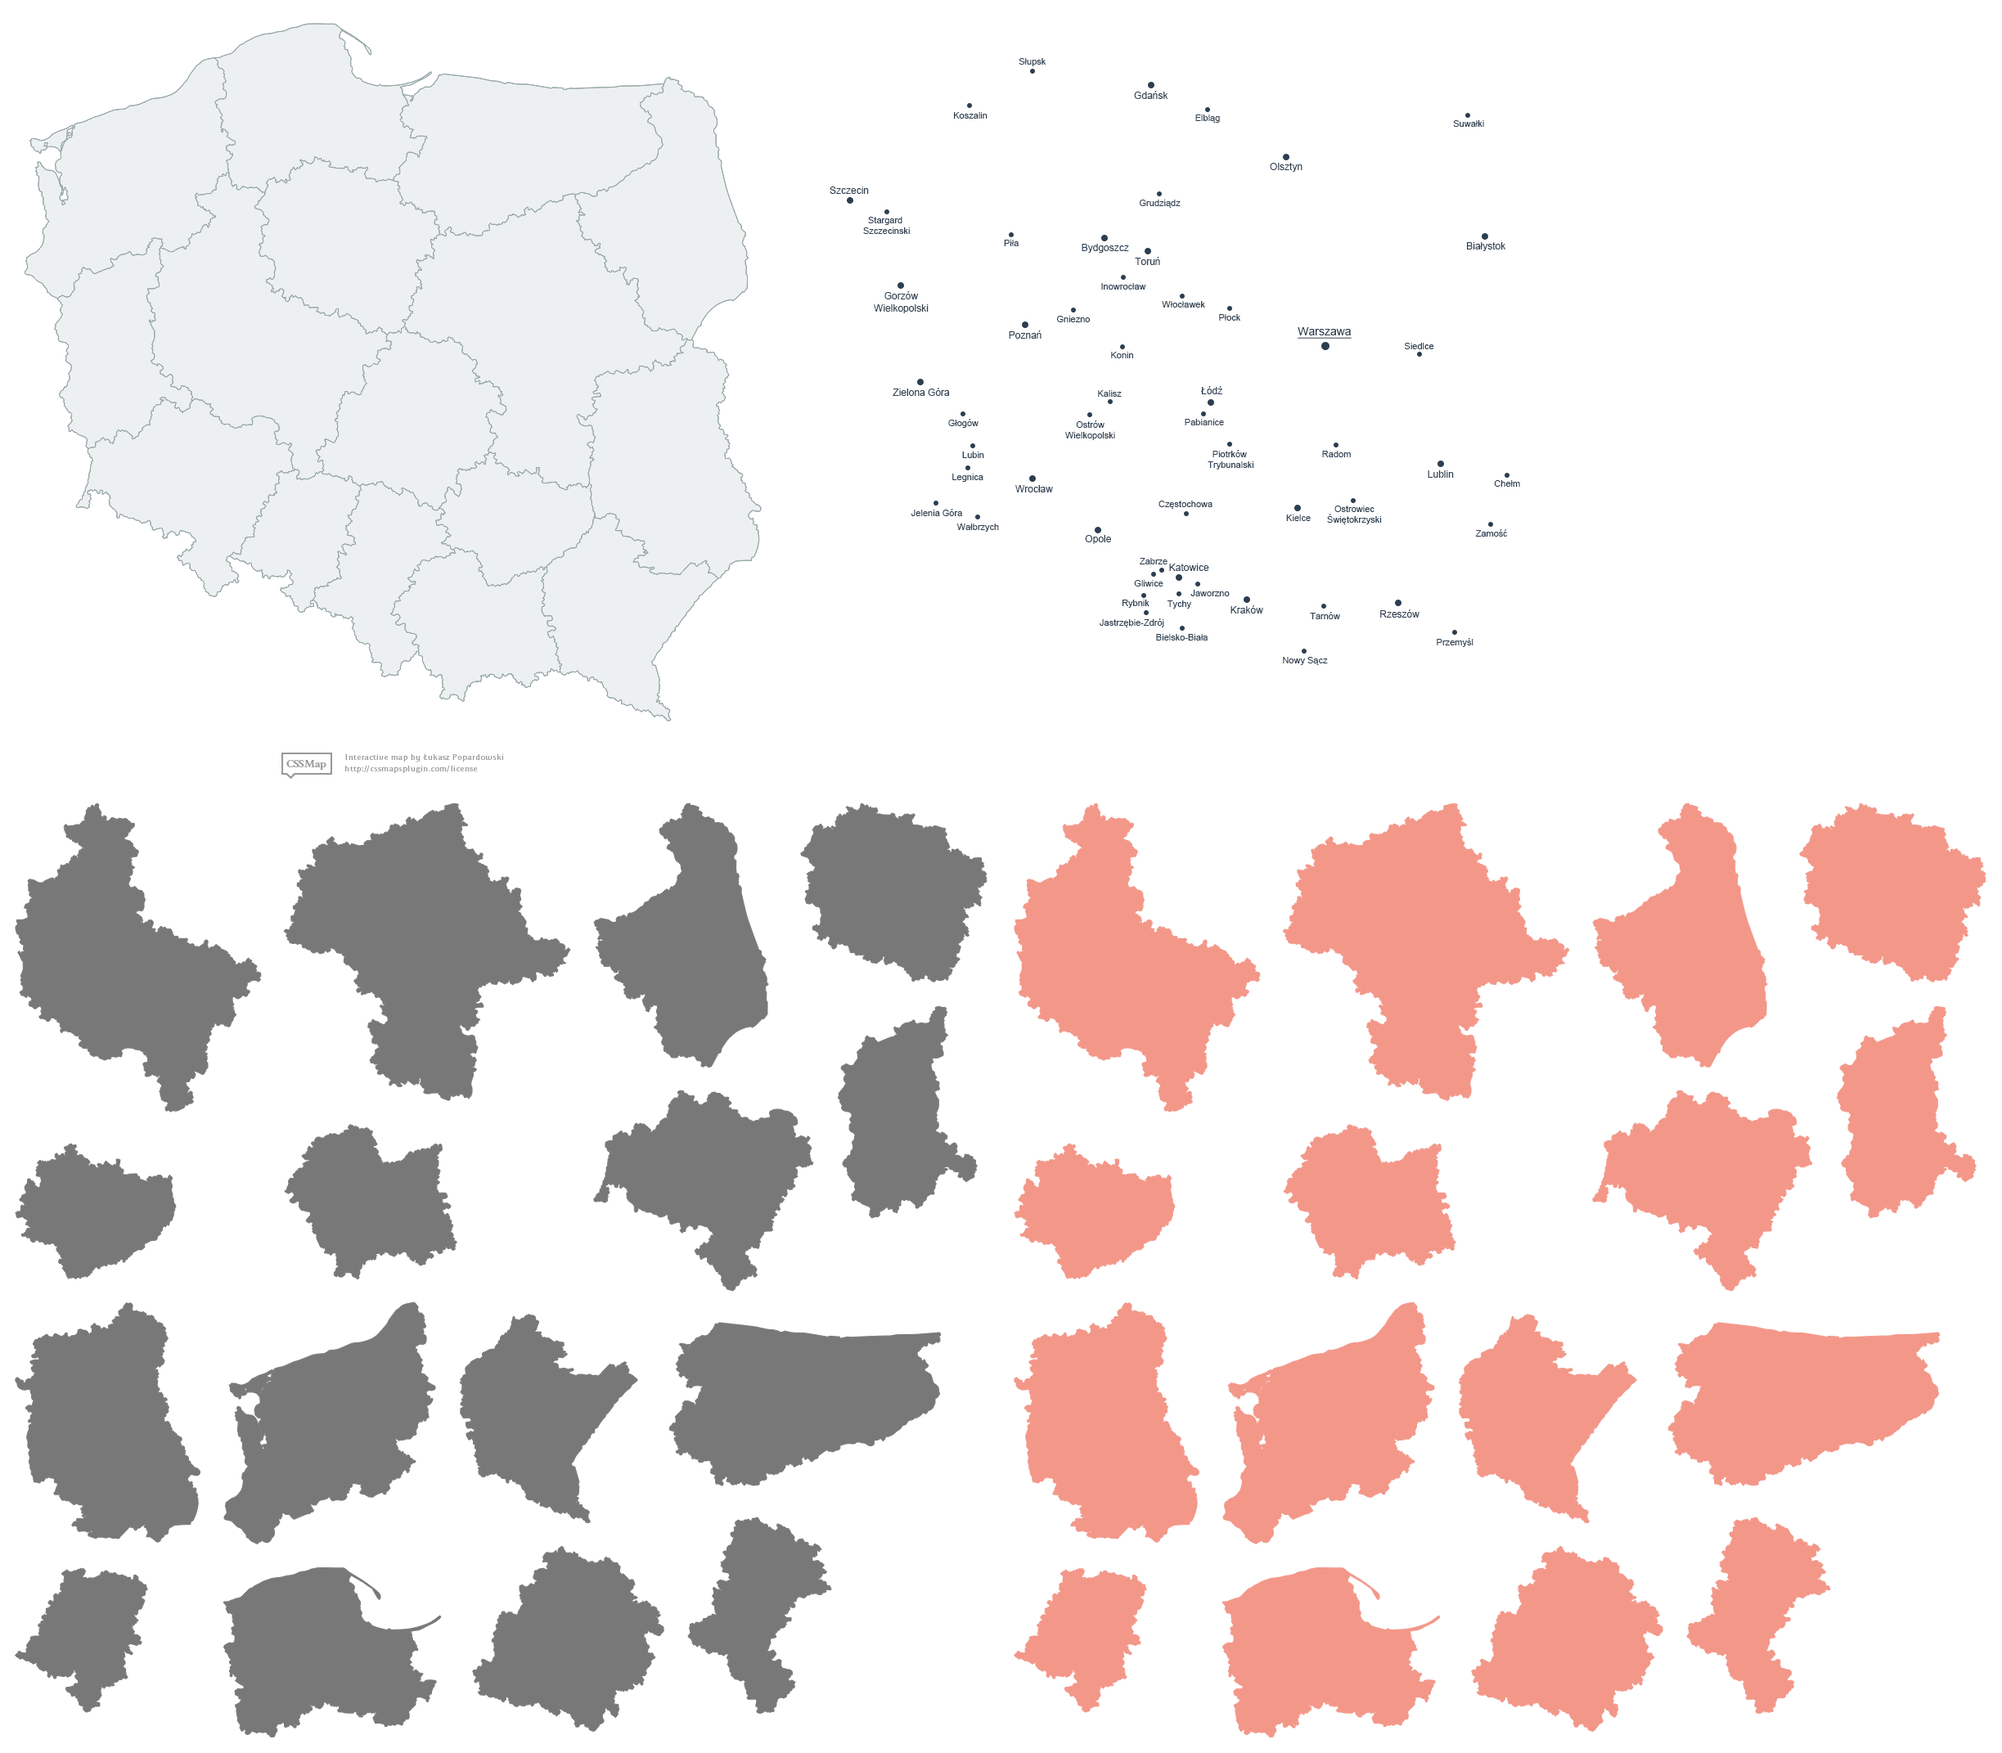
<style>
.page{position:relative;width:2002px;height:1753px;background:#ffffff}
.page>*{position:absolute;margin:0}
.t1{font:9px "ArialMT";color:#2c3e50}
.t2{font:9.8px "ArialMT";color:#2c3e50}
.t3{font:11.5px "ArialMT";color:#2c3e50;text-decoration:underline}
</style>
<div class="page">
<p class="t1" style="left:1019px;top:58px;width:27px;height:8px">Słupsk</p>
<p class="t2" style="left:1134px;top:91px;width:34px;height:8px">Gdańsk</p>
<p class="t1" style="left:954px;top:112px;width:34px;height:7px">Koszalin</p>
<p class="t1" style="left:1195px;top:115px;width:25px;height:8px">Elbląg</p>
<p class="t1" style="left:1453px;top:120px;width:31px;height:7px">Suwałki</p>
<p class="t2" style="left:1270px;top:163px;width:33px;height:9px">Olsztyn</p>
<p class="t2" style="left:830px;top:187px;width:39px;height:7px">Szczecin</p>
<p class="t1" style="left:1140px;top:200px;width:41px;height:8px">Grudziądz</p>
<p class="t1" style="left:863px;top:217px;width:47px;height:17px;text-align:center">Stargard <br>Szczecinski</p>
<p class="t1" style="left:1004px;top:240px;width:15px;height:6px">Piła</p>
<p class="t2" style="left:1082px;top:244px;width:47px;height:9px">Bydgoszcz</p>
<p class="t2" style="left:1467px;top:242px;width:38px;height:9px">Białystok</p>
<p class="t2" style="left:1135px;top:257px;width:25px;height:8px">Toruń</p>
<p class="t2" style="left:874px;top:291px;width:55px;height:22px;text-align:center">Gorzów<br>Wielkopolski</p>
<p class="t1" style="left:1101px;top:283px;width:45px;height:7px">Inowrocław</p>
<p class="t1" style="left:1162px;top:301px;width:43px;height:7px">Włocławek</p>
<p class="t1" style="left:1057px;top:316px;width:34px;height:6px">Gniezno</p>
<p class="t1" style="left:1219px;top:314px;width:21px;height:7px">Płock</p>
<p class="t3" style="left:1298px;top:327px;width:54px;height:12px">Warszawa</p>
<p class="t2" style="left:1009px;top:331px;width:33px;height:8px">Poznań</p>
<p class="t1" style="left:1111px;top:352px;width:22px;height:6px">Konin</p>
<p class="t1" style="left:1404px;top:343px;width:30px;height:6px">Siedlce</p>
<p class="t2" style="left:893px;top:388px;width:57px;height:8px">Zielona Góra</p>
<p class="t2" style="left:1201px;top:386px;width:21px;height:8px">Łódź</p>
<p class="t1" style="left:1098px;top:390px;width:24px;height:7px">Kalisz</p>
<p class="t1" style="left:948px;top:419px;width:31px;height:9px">Głogów</p>
<p class="t1" style="left:1065px;top:421px;width:50px;height:19px;text-align:center">Ostrów<br>Wielkopolski</p>
<p class="t1" style="left:1185px;top:419px;width:39px;height:6px">Pabianice</p>
<p class="t1" style="left:1208px;top:450px;width:46px;height:20px;text-align:center">Piotrków <br>Trybunalski</p>
<p class="t1" style="left:962px;top:452px;width:22px;height:6px">Lubin</p>
<p class="t1" style="left:1322px;top:451px;width:29px;height:6px">Radom</p>
<p class="t1" style="left:952px;top:474px;width:31px;height:8px">Legnica</p>
<p class="t2" style="left:1428px;top:470px;width:26px;height:8px">Lublin</p>
<p class="t2" style="left:1015px;top:485px;width:38px;height:8px">Wrocław</p>
<p class="t1" style="left:1494px;top:480px;width:26px;height:7px">Chełm</p>
<p class="t1" style="left:911px;top:509px;width:51px;height:7px">Jelenia Góra</p>
<p class="t1" style="left:1159px;top:501px;width:54px;height:8px">Częstochowa</p>
<p class="t1" style="left:1327px;top:506px;width:55px;height:18px;text-align:center">Ostrowiec<br>Świętokrzyski</p>
<p class="t1" style="left:1286px;top:515px;width:25px;height:6px">Kielce</p>
<p class="t1" style="left:956px;top:524px;width:43px;height:8px">Wałbrzych</p>
<p class="t1" style="left:1475px;top:529px;width:32px;height:8px">Zamość</p>
<p class="t2" style="left:1085px;top:535px;width:26px;height:9px">Opole</p>
<p class="t1" style="left:1140px;top:558px;width:28px;height:7px">Zabrze</p>
<p class="t2" style="left:1169px;top:564px;width:40px;height:7px">Katowice</p>
<p class="t1" style="left:1134px;top:580px;width:29px;height:7px">Gliwice</p>
<p class="t1" style="left:1190px;top:590px;width:40px;height:6px">Jaworzno</p>
<p class="t1" style="left:1123px;top:600px;width:27px;height:8px">Rybnik</p>
<p class="t1" style="left:1167px;top:601px;width:24px;height:8px">Tychy</p>
<p class="t2" style="left:1231px;top:605px;width:32px;height:9px">Kraków</p>
<p class="t1" style="left:1310px;top:612px;width:30px;height:7px">Tarnów</p>
<p class="t2" style="left:1380px;top:610px;width:40px;height:8px">Rzeszów</p>
<p class="t1" style="left:1100px;top:619px;width:64px;height:9px">Jastrzębie-Zdrój</p>
<p class="t1" style="left:1156px;top:634px;width:52px;height:7px">Bielsko-Biała</p>
<p class="t1" style="left:1437px;top:638px;width:37px;height:9px">Przemyśl</p>
<p class="t1" style="left:1283px;top:657px;width:45px;height:8px">Nowy Sącz</p>
</div>
